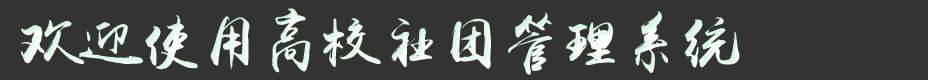
<style>
.page{position:relative;width:928px;height:80px;background:#333333}
.page>*{position:absolute;margin:0}
.t1{font:60px "yuweij";color:#e6fbec}
</style>
<div class="page">
<p class="t1" style="left:21px;top:8px;width:719px;height:67px">欢迎使用高校社团管理系统</p>
</div>
